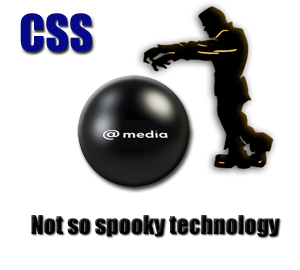
<style>
.page{position:relative;width:300px;height:270px;background:#ffffff}
.page>*{position:absolute;margin:0}
.t1{font:46.8px "Impact";color:#070a88}
.t2{font:23.9px "Impact";color:#000000}
</style>
<div class="page">
<p class="t1" style="left:20px;top:13px;width:72px;height:39px">CSS</p>
<p class="t2" style="left:31px;top:215px;width:249px;height:22px">Not so spooky technology</p>
</div>
